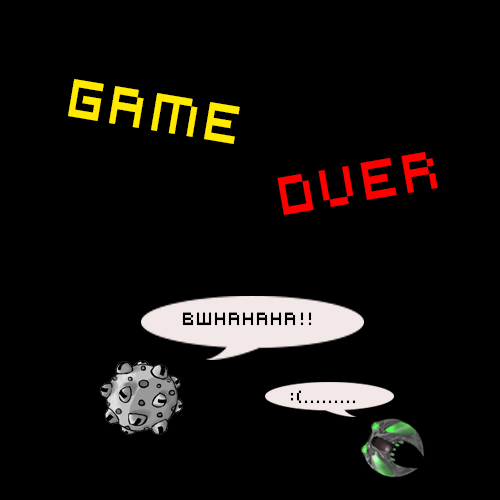
<style>
.page{position:relative;width:500px;height:500px;background:#000000}
.page>*{position:absolute;margin:0}
.t1{font:60px "VirtualDJ";color:#ffea00;scale:0.8 1}
.t2{font:60px "VirtualDJ";color:#ff0000;scale:0.8 1}
.t3{font:20px "VirtualDJ";color:#000000;scale:0.8 1}
</style>
<div class="page">
<p class="t1" style="left:68px;top:79px;width:172px;height:65px;rotate:10deg">GAME</p>
<p class="t2" style="left:277px;top:152px;width:161px;height:63px;rotate:-10deg">OVER</p>
<p class="t3" style="left:182px;top:312px;width:130px;height:14px">BWHAHAHA!!</p>
<p class="t3" style="left:290px;top:390px;width:66px;height:14px">:(.........</p>
</div>
